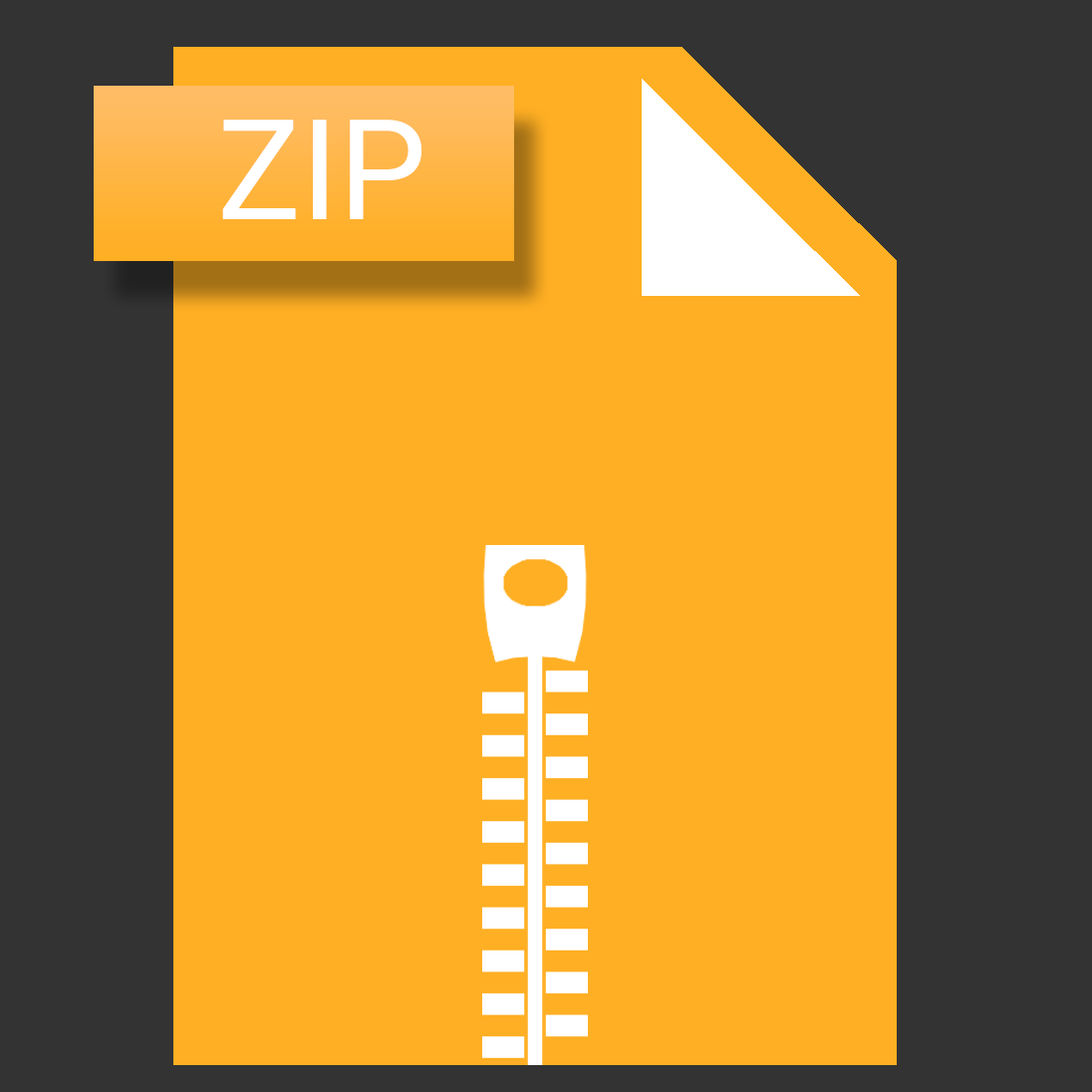
<style>
.page{position:relative;width:1092px;height:1092px;background:#ffaf23}
.page>*{position:absolute;margin:0}
.t1{font:139.5px "Roboto-Regular";color:#ffffff}
</style>
<div class="page">
<p class="t1" style="left:222px;top:120px;width:199px;height:99px">ZIP</p>
</div>
